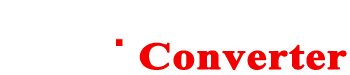
<style>
.page{position:relative;width:350px;height:75px;background:#ffffff}
.page>*{position:absolute;margin:0}
.t1{font:37.5px "TimesNewRomanPS-BoldMT";color:#f30000;font-weight:bold;scale:1.21 1}
</style>
<div class="page">
<p class="t1" style="left:139px;top:42px;width:208px;height:28px">Converter</p>
</div>
